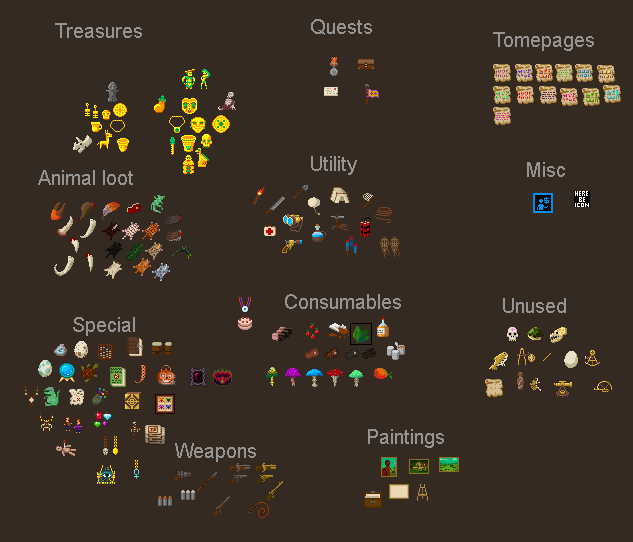
<style>
.page{position:relative;width:633px;height:542px;background:#342a22}
.page>*{position:absolute;margin:0}
.t1{font:20.2px "ArialMT";color:#959493}
</style>
<div class="page">
<p class="t1" style="left:55px;top:23px;width:87px;height:15px">Treasures</p>
<p class="t1" style="left:311px;top:19px;width:61px;height:16px">Quests</p>
<p class="t1" style="left:493px;top:32px;width:101px;height:19px">Tomepages</p>
<p class="t1" style="left:311px;top:156px;width:46px;height:19px">Utility</p>
<p class="t1" style="left:38px;top:170px;width:95px;height:15px">Animal loot</p>
<p class="t1" style="left:527px;top:162px;width:38px;height:15px">Misc</p>
<p class="t1" style="left:285px;top:294px;width:116px;height:15px">Consumables</p>
<p class="t1" style="left:503px;top:298px;width:63px;height:15px">Unused</p>
<p class="t1" style="left:73px;top:317px;width:62px;height:19px">Special</p>
<p class="t1" style="left:368px;top:429px;width:76px;height:19px">Paintings</p>
<p class="t1" style="left:175px;top:443px;width:81px;height:19px">Weapons</p>
</div>
